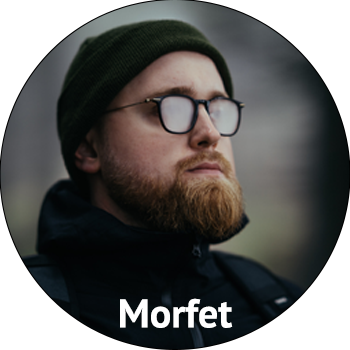
<style>
.page{position:relative;width:350px;height:350px;background:#ffffff}
.page>*{position:absolute;margin:0}
.t1{font:40px "PTSans-Bold";color:#ffffff}
</style>
<div class="page">
<p class="t1" style="left:120px;top:298px;width:113px;height:30px">Morfet</p>
</div>
